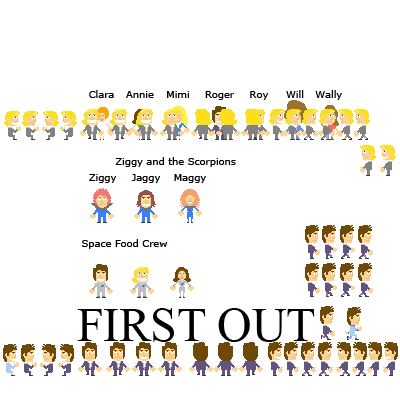
<style>
.page{position:relative;width:400px;height:400px;background:#ffffff}
.page>*{position:absolute;margin:0}
.t1{font:10px "Verdana";letter-spacing:-0.007em;color:#000000}
.t2{font:48px "TimesNewRomanPSMT";letter-spacing:-0.007em;color:#000000}
</style>
<div class="page">
<p class="t1" style="left:89px;top:90px;width:25px;height:8px">Clara</p>
<p class="t1" style="left:126px;top:91px;width:28px;height:7px">Annie</p>
<p class="t1" style="left:167px;top:91px;width:22px;height:7px">Mimi</p>
<p class="t1" style="left:205px;top:91px;width:30px;height:9px">Roger</p>
<p class="t1" style="left:250px;top:91px;width:19px;height:9px">Roy</p>
<p class="t1" style="left:286px;top:90px;width:18px;height:8px">Will</p>
<p class="t1" style="left:315px;top:90px;width:27px;height:10px">Wally</p>
<p class="t1" style="left:115px;top:157px;width:121px;height:10px">Ziggy and the Scorpions</p>
<p class="t1" style="left:89px;top:174px;width:28px;height:9px">Ziggy</p>
<p class="t1" style="left:131px;top:174px;width:30px;height:9px">Jaggy</p>
<p class="t1" style="left:174px;top:174px;width:32px;height:9px">Maggy</p>
<p class="t1" style="left:82px;top:239px;width:86px;height:10px">Space Food Crew</p>
<p class="t2" style="left:77px;top:308px;width:238px;height:34px">FIRST OUT</p>
</div>
